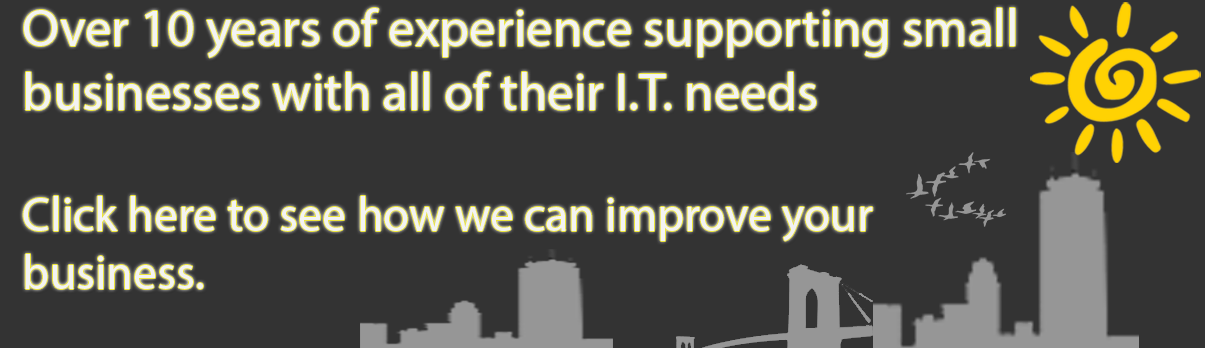
<style>
.page{position:relative;width:1205px;height:348px;background:#333333}
.page>*{position:absolute;margin:0}
.t1{font:53.1px "MyriadPro-Regular";color:#f3f3f3}
.t2{font:48px "MyriadPro-Regular";color:#f3f3f3}
</style>
<div class="page">
<p class="t1" style="left:23px;top:8px;width:992px;height:281px">Over 10 years of experience supporting small<br>businesses with all of their I.T. needs<br><br><span class="t2">Click here to see how we can improve your  <br>business.</span></p>
</div>
